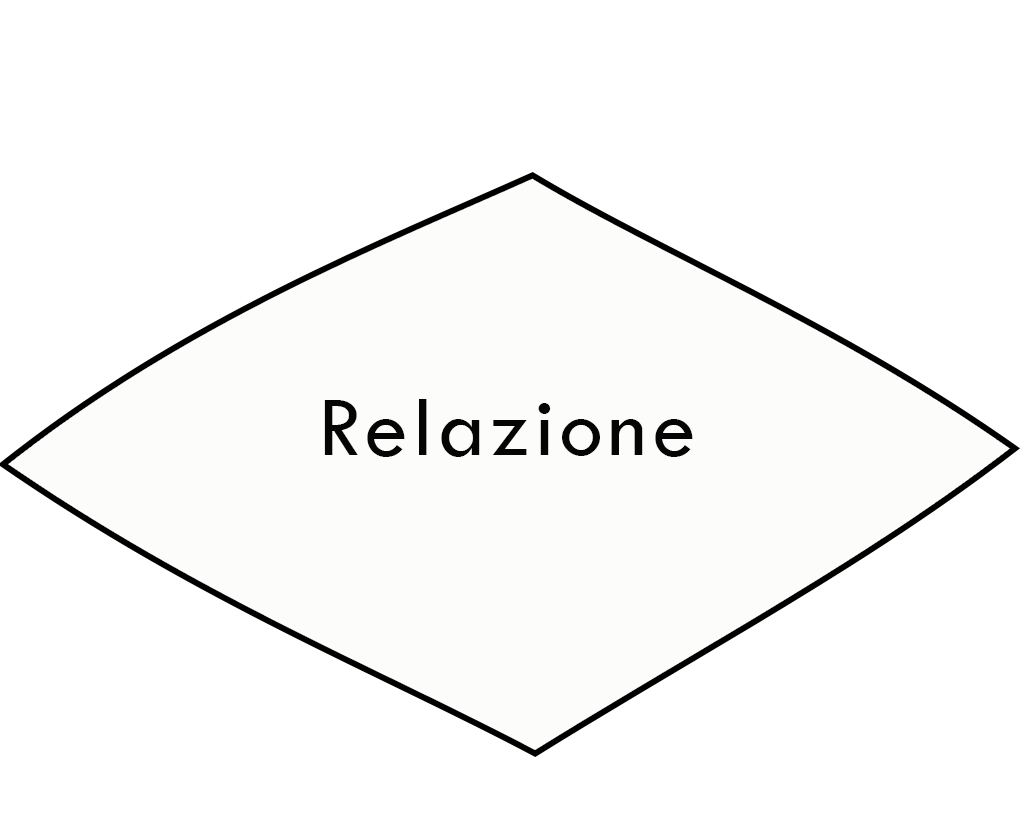
<style>
.page{position:relative;width:1021px;height:817px;background:#ffffff}
.page>*{position:absolute;margin:0}
.t1{font:87.5px "TwCenMT-Regular";letter-spacing:0.06em;color:#050505}
</style>
<div class="page">
<p class="t1" style="left:324px;top:399px;width:369px;height:58px">Relazione</p>
</div>
